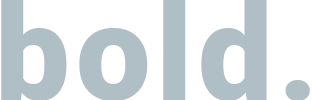
<style>
.page{position:relative;width:312px;height:100px;background:#ffffff}
.page>*{position:absolute;margin:0}
.t1{font:133.3px "Roboto-Black";letter-spacing:0.04em;color:#b0bec5}
</style>
<div class="page">
<p class="t1" style="left:1px;top:0px;width:309px;height:101px">bold.</p>
</div>
